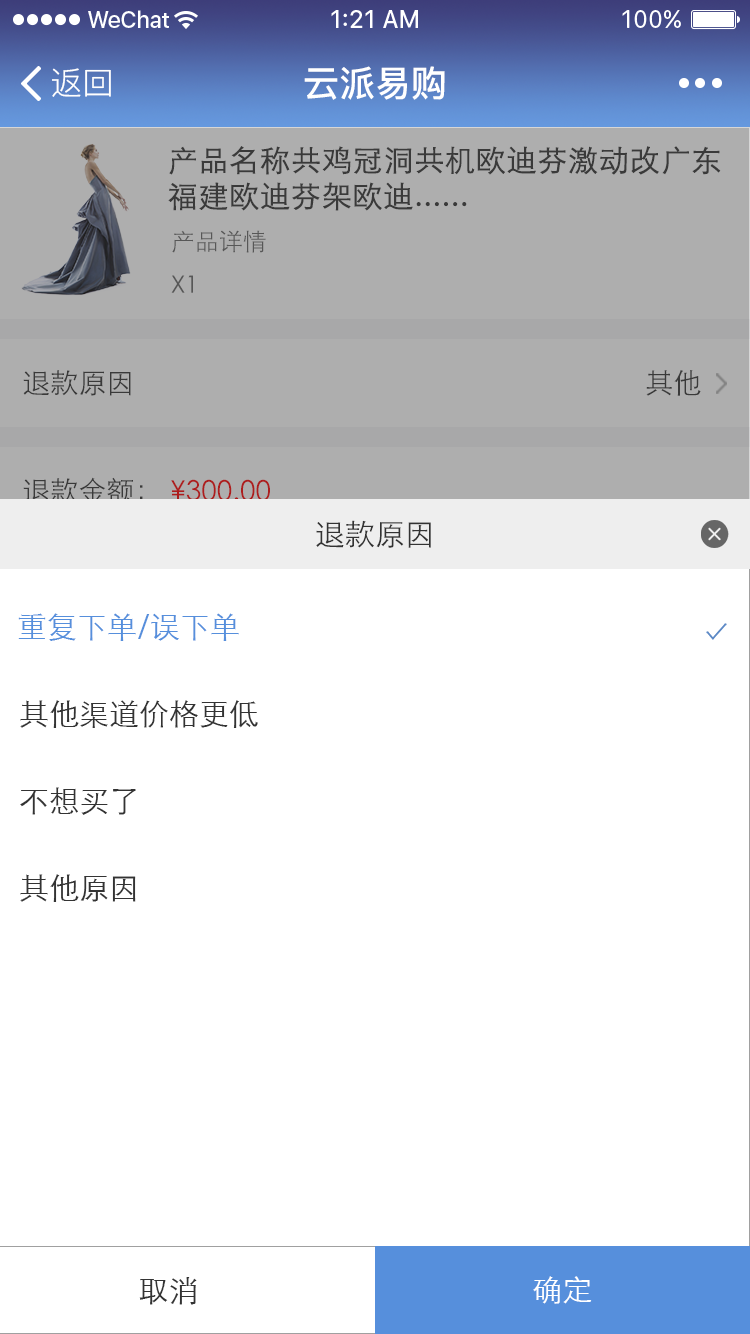
<style>
.page{position:relative;width:750px;height:1334px;background:#ffffff}
.page>*{position:absolute;margin:0}
.t1{font:32px "PingFang-SC-Regular";color:#ffffff}
.t2{font:36px "PingFang-SC-Bold";color:#ffffff}
.t3{font:30px "STXihei";color:#333333;font-weight:bold}
.t4{font:24px "STXihei";color:#666666}
.t5{font:28px "STXihei";color:#333333}
.t6{font:28px "STXihei";color:#ad1d1d}
.t7{font:30px "STXihei";color:#333333}
.t8{font:30px "STXihei";color:#568fdc}
.t9{font:30px "STXihei";color:#ffffff}
</style>
<div class="page">
<p class="t1" style="left:52px;top:68px;width:59px;height:29px">返回</p>
<p class="t2" style="left:304px;top:66px;width:141px;height:34px">云派易购</p>
<p class="t3" style="left:168px;top:146px;width:553px;height:65px">产品名称共鸡冠洞共机欧迪芬激动改广东福建欧迪芬架欧迪......</p>
<p class="t4" style="left:172px;top:230px;width:94px;height:23px">产品详情</p>
<p class="t4" style="left:171px;top:275px;width:22px;height:18px">X1</p>
<p class="t5" style="left:23px;top:370px;width:108px;height:26px">退款原因</p>
<p class="t5" style="left:646px;top:370px;width:55px;height:26px">其他</p>
<p class="t5" style="left:23px;top:477px;width:120px;height:27px">退款金额：</p>
<p class="t6" style="left:171px;top:479px;width:99px;height:22px">¥300.00</p>
<p class="t7" style="left:316px;top:520px;width:115px;height:28px">退款原因</p>
<p class="t8" style="left:18px;top:613px;width:221px;height:28px">重复下单/误下单</p>
<p class="t7" style="left:20px;top:700px;width:238px;height:28px">其他渠道价格更低</p>
<p class="t7" style="left:20px;top:787px;width:116px;height:28px">不想买了</p>
<p class="t7" style="left:20px;top:874px;width:116px;height:28px">其他原因</p>
<p class="t7" style="left:139px;top:1277px;width:58px;height:28px">取消</p>
<p class="t9" style="left:533px;top:1276px;width:59px;height:28px">确定</p>
</div>
